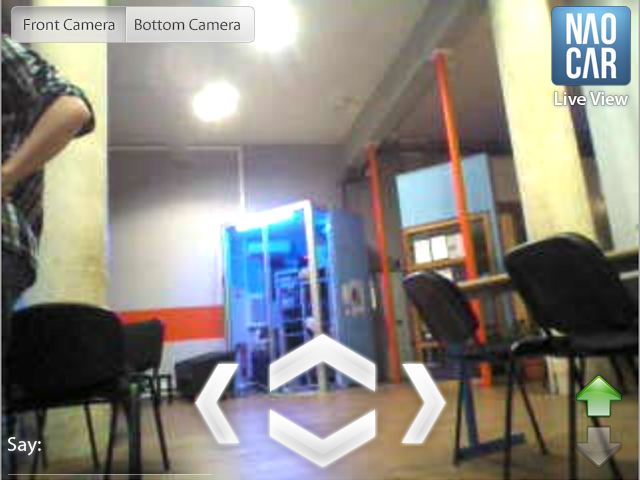
<style>
.page{position:relative;width:640px;height:480px}
.page>*{position:absolute;margin:0}
.t1{font:16.4px "MyriadPro-Regular";color:#40403f}
.t2{font:16.4px "MyriadPro-Regular"}
.t3{font:18.5px "MyriadPro-Semibold";color:#ffffff}
.t4{font:20.7px "MyriadPro-Regular";color:#ffffff}
</style>
<div class="page">
<p class="t1" style="left:24px;top:18px;width:91px;height:13px">Front Camera</p>
<p class="t2" style="left:135px;top:18px;width:105px;height:13px">Bottom Camera</p>
<p class="t3" style="left:555px;top:92px;width:73px;height:13px">Live View</p>
<p class="t4" style="left:7px;top:437px;width:34px;height:19px">Say:</p>
</div>
